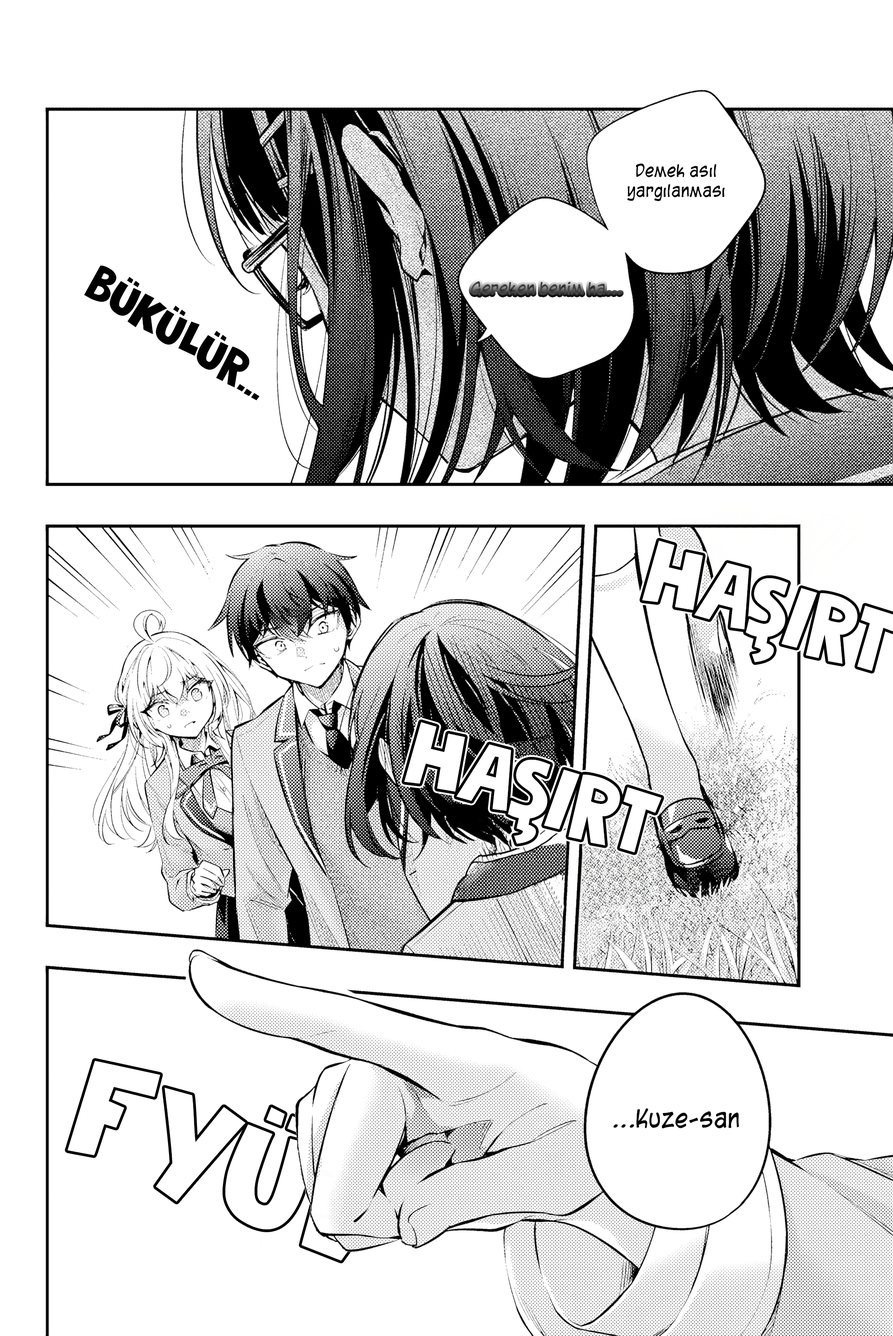
<style>
.page{position:relative;width:893px;height:1336px;background:#ffffff}
.page>*{position:absolute;margin:0}
.t1{font:16.8px "MyEBlambotCasual";color:#000000}
.t2{font:49.3px "FrozenMemory-Regular";color:#000000;text-transform:uppercase}
.t3{font:16.8px "MyEBlambotCasual";color:#424242}
.t4{font:89.4px "FrozenMemory-Regular";color:#ffffff;text-transform:uppercase}
.t5{font:24.2px "MyEBlambotCasual";color:#000000}
</style>
<div class="page">
<p class="t1" style="left:627px;top:163px;width:98px;height:38px;text-align:center">Demek asıl<br>yargılanması</p>
<p class="t2" style="left:84px;top:265px;width:176px;height:135px;rotate:32deg">Bükülür...</p>
<p class="t3" style="left:471px;top:281px;width:150px;height:15px">Gereken benim ha...</p>
<p class="t4" style="left:404px;top:722px;width:257px;height:130px;rotate:17deg">Haşırt</p>
<p class="t5" style="left:613px;top:1108px;width:126px;height:20px">...Kuze-san</p>
</div>
